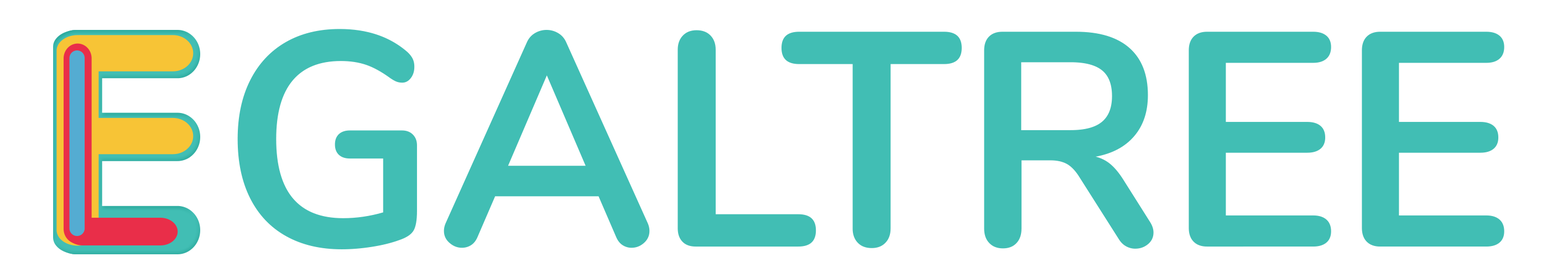
<style>
.page{position:relative;width:1568px;height:277px;background:#ffffff}
.page>*{position:absolute;margin:0}
.t1{font:304.1px "Nunito-Bold";color:#41beb4;scale:0.97 1}
</style>
<div class="page">
<p class="t1" style="left:237px;top:29px;width:1267px;height:220px">GALTREE</p>
</div>
